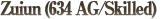
<style>
.page{position:relative;width:168px;height:19px;background:#ffffff}
.page>*{position:absolute;margin:0}
.t1{font:18px "RyuminPro-ExBold";letter-spacing:-0.08em;color:#4a3f32;font-weight:bold;scale:0.9 1}
</style>
<div class="page">
<p class="t1" style="left:0px;top:0px;width:157px;height:19px">Zuiun (634 AG/Skilled)</p>
</div>
